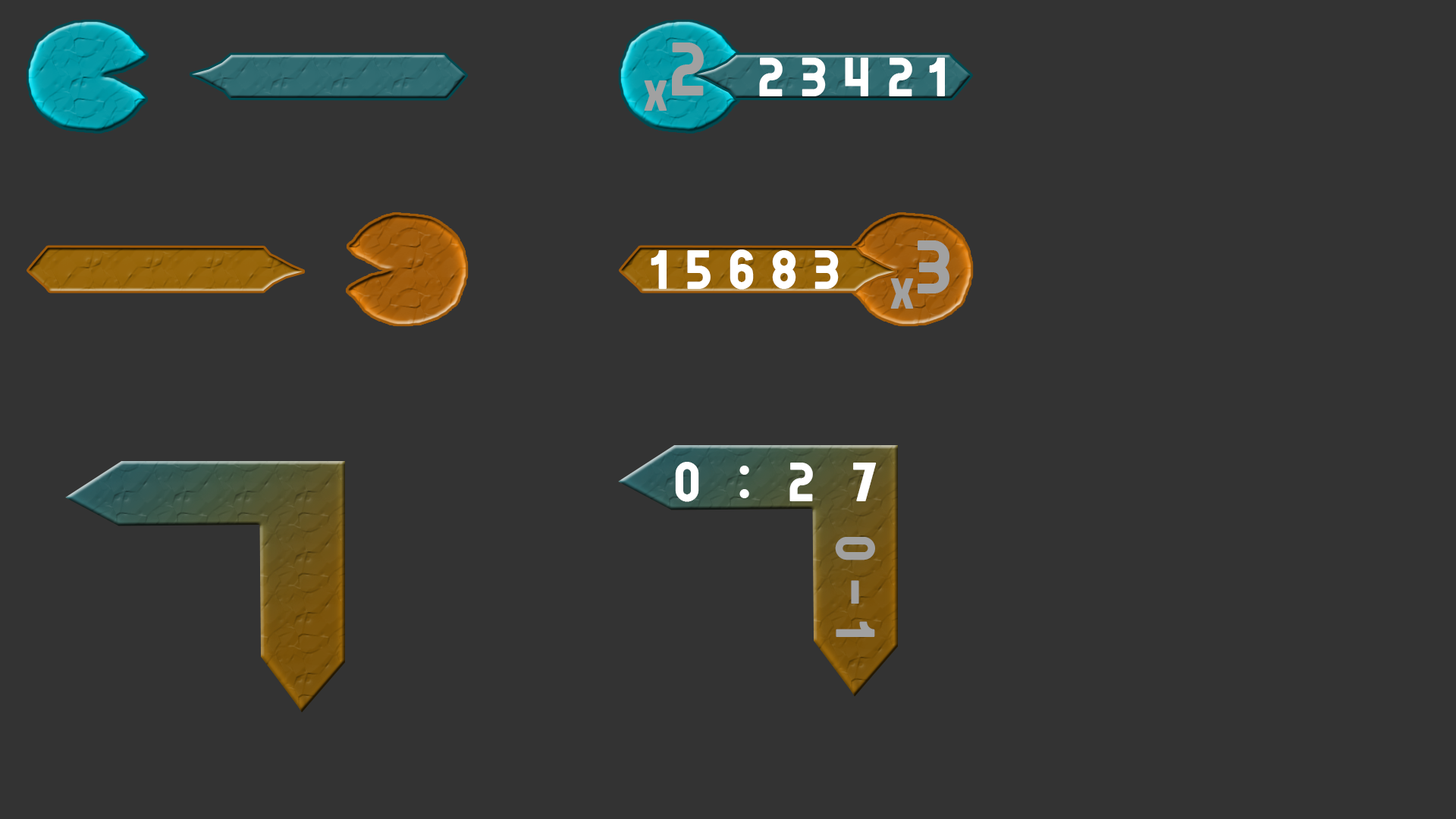
<style>
.page{position:relative;width:1456px;height:819px;background:#333333}
.page>*{position:absolute;margin:0}
.t1{font:75.8px "GRAFIKATYPE.1-Regular";letter-spacing:0.28em;color:#a1a1a1}
.t2{font:54.6px "GRAFIKATYPE.1-Regular";letter-spacing:0.28em;color:#ffffff}
.t3{font:54.6px "GRAFIKATYPE.1-Regular";letter-spacing:0.28em;color:#a1a1a1}
.t4{font:54.6px "GRAFIKATYPE.1-Regular";letter-spacing:0.66em;color:#ffffff}
.t5{font:54.9px "GRAFIKATYPE.1-Regular";letter-spacing:0.28em;color:#a1a1a1}
</style>
<div class="page">
<p class="t1" style="left:672px;top:42px;width:32px;height:54px">2</p>
<p class="t2" style="left:759px;top:58px;width:186px;height:38px">23421</p>
<p class="t3" style="left:644px;top:80px;width:23px;height:31px">x</p>
<p class="t1" style="left:918px;top:240px;width:31px;height:53px">3</p>
<p class="t2" style="left:651px;top:249px;width:188px;height:41px">15683</p>
<p class="t3" style="left:890px;top:278px;width:24px;height:31px">x</p>
<p class="t4" style="left:675px;top:462px;width:202px;height:40px">0:27</p>
<p class="t5" style="left:835px;top:537px;width:40px;height:100px;rotate:90deg">0-1</p>
</div>
